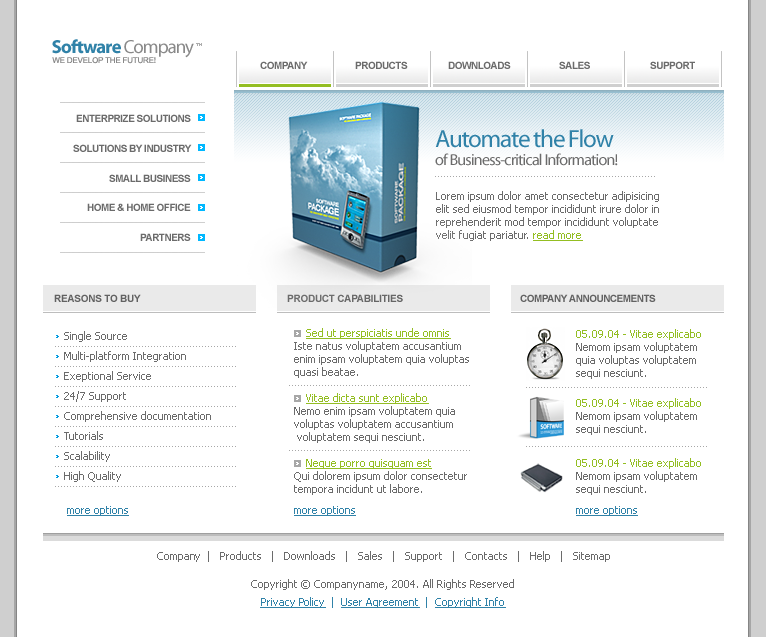
<style>
.page{position:relative;width:766px;height:637px;background:#ffffff}
.page>*{position:absolute;margin:0}
.t1{font:19px "Myriad-Bold";letter-spacing:-0.05em;color:#3082a8}
.t2{font:19px "Myriad-Roman";letter-spacing:-0.05em;color:#898989}
.t3{font:8px "ArialMT";letter-spacing:-0.025em;color:#898989;text-transform:uppercase}
.t4{font:10px "Arial-BoldMT";letter-spacing:-0.05em;color:#6b6b6b;text-transform:uppercase}
.t5{font:16px/18px "Myriad-Roman";letter-spacing:-0.05em;color:#6b6b6b}
.t6{font:25px/18px "Myriad-Roman";letter-spacing:-0.05em;color:#3082a8}
.t7{font:11px/13px "Tahoma";color:#6b6b6b}
.t8{font:11px/13px "Tahoma";color:#94be22;text-decoration:underline}
.t9{font:10px "Arial-BoldMT";letter-spacing:-0.025em;color:#6b6b6b;text-transform:uppercase}
.t10{font:11px/13px "Tahoma";color:#94be23}
.t11{font:11px/13px "Tahoma";color:#94be23;text-decoration:underline}
.t12{font:11px/20px "Tahoma";color:#6b6b6b}
.t13{font:11px "Tahoma";color:#3082a8;text-decoration:underline}
.t14{font:11px "Tahoma";color:#6b6b6b}
.t15{font:11px/18px "Tahoma";color:#6b6b6b}
.t16{font:11px/18px "Tahoma";color:#3082a8;text-decoration:underline}
.t17{font:11px/18px "Tahoma";color:#3082a8}
</style>
<div class="page">
<p class="t1" style="left:52px;top:39px;width:142px;height:19px">Software <span class="t2">Company</span></p>
<p class="t3" style="left:52px;top:57px;width:104px;height:7px">We Develop the Future!</p>
<p class="t4" style="left:260px;top:61px;width:48px;height:8px">Company</p>
<p class="t4" style="left:355px;top:61px;width:53px;height:8px">Products</p>
<p class="t4" style="left:448px;top:61px;width:63px;height:8px">Downloads</p>
<p class="t4" style="left:559px;top:61px;width:31px;height:8px">Sales</p>
<p class="t4" style="left:650px;top:61px;width:45px;height:8px">Support</p>
<p class="t4" style="left:76px;top:114px;width:115px;height:8px">Enterprize Solutions</p>
<p class="t5" style="left:435px;top:129px;width:183px;height:37px"><span class="t6">Automate the Flow<br></span>of Business-critical Information!</p>
<p class="t4" style="left:73px;top:144px;width:119px;height:8px">Solutions by Industry</p>
<p class="t4" style="left:109px;top:174px;width:82px;height:8px">Small Business</p>
<p class="t7" style="left:436px;top:191px;width:223px;height:50px">Lorem ipsum dolor amet consectetur adipisicing<br>elit sed eiusmod tempor incididunt irure dolor in reprehenderit mod tempor incididunt voluptate velit fugiat pariatur. <span class="t8">read more</span></p>
<p class="t4" style="left:87px;top:203px;width:104px;height:8px">Home &amp; Home Office</p>
<p class="t4" style="left:140px;top:233px;width:51px;height:8px">Partners</p>
<p class="t9" style="left:54px;top:294px;width:87px;height:8px">reasons to buy</p>
<p class="t9" style="left:287px;top:294px;width:116px;height:8px">PRODUCT CAPABILITIES</p>
<p class="t4" style="left:520px;top:294px;width:136px;height:8px">COMPANY ANNOUNCEMENTS</p>
<p class="t7" style="left:294px;top:328px;width:175px;height:167px"><span class="t10">    </span><span class="t11">Sed ut perspiciatis unde omnis<br></span>Iste natus voluptatem accusantium enim ipsam voluptatem quia voluptas quasi beatae.<br><br>    <span class="t11">Vitae dicta sunt explicabo<br></span>Nemo enim ipsam voluptatem quia voluptas voluptatem accusantium<br> voluptatem sequi nesciunt.<br><br>    <span class="t11">Neque porro quisquam est<br></span>Qui dolorem ipsum dolor consectetur tempora incidunt ut labore.</p>
<p class="t7" style="left:576px;top:329px;width:125px;height:50px"><span class="t10">05.09.04 - Vitae explicabo<br></span>Nemom ipsam voluptatem quia voluptas voluptatem sequi nesciunt.</p>
<p class="t12" style="left:64px;top:331px;width:147px;height:151px">Single Source<br>Multi-platform Integration<br>Exeptional Service<br>24/7 Support<br>Comprehensive documentation<br>Tutorials<br>Scalability<br>High Quality</p>
<p class="t7" style="left:576px;top:398px;width:125px;height:37px"><span class="t10">05.09.04 - Vitae explicabo<br></span>Nemom ipsam voluptatem  sequi nesciunt.</p>
<p class="t7" style="left:576px;top:458px;width:125px;height:37px"><span class="t10">05.09.04 - Vitae explicabo<br></span>Nemom ipsam voluptatem sequi nesciunt.</p>
<p class="t13" style="left:67px;top:506px;width:62px;height:10px">more options</p>
<p class="t13" style="left:294px;top:506px;width:62px;height:10px">more options</p>
<p class="t13" style="left:576px;top:506px;width:62px;height:10px">more options</p>
<p class="t14" style="left:157px;top:551px;width:453px;height:11px">Company  |   Products   |   Downloads   |   Sales   |   Support   |   Contacts   |   Help   |   Sitemap</p>
<p class="t15" style="left:251px;top:579px;width:263px;height:29px;text-align:center">Copyright © Companyname, 2004. All Rights Reserved<br><span class="t16">Privacy Policy</span><span class="t17">  |  </span><span class="t16">User Agreement</span><span class="t17">  |  </span><span class="t16">Copyright Info</span></p>
</div>
